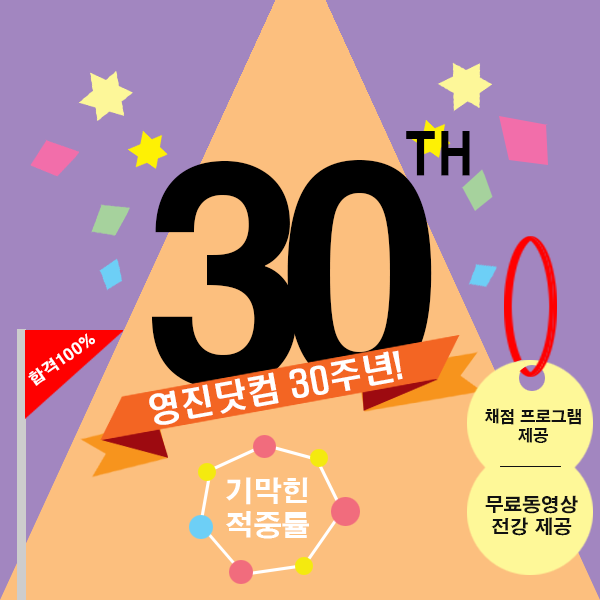
<style>
.page{position:relative;width:600px;height:600px;background:#a286c0}
.page>*{position:absolute;margin:0}
.t1{font:57.6px "H2gtrE";color:#000000;scale:0.81 1}
.t2{font:286px "H2gtrE";color:#000000}
.t3{font:282.1px "H2gtrE";color:#000000}
.t4{font:15.5px "H2gtrE";color:#ffffff}
.t5{font:33.4px "H2hdrM";color:#ffffff}
.t6{font:15.9px "H2gtrE";color:#111111}
.t7{font:28.5px "H2gtrE";color:#ffffff}
.t8{font:18.6px "H2gtrE";color:#111111}
</style>
<div class="page">
<p class="t1" style="left:406px;top:131px;width:64px;height:45px">TH</p>
<p class="t2" style="left:151px;top:161px;width:146px;height:228px">3</p>
<p class="t3" style="left:287px;top:160px;width:145px;height:226px">0</p>
<p class="t4" style="left:28px;top:333px;width:67px;height:53px;rotate:-35deg">합격100%</p>
<p class="t5" style="left:149px;top:350px;width:254px;height:75px;rotate:-10deg">영진닷컴 30주년!</p>
<p class="t6" style="left:484px;top:408px;width:98px;height:35px;text-align:center">채점 프로그램<br>제공</p>
<p class="t7" style="left:226px;top:477px;width:83px;height:62px">기막힌<br>적중률</p>
<p class="t8" style="left:485px;top:495px;width:93px;height:41px;text-align:center">무료동영상<br>전강 제공</p>
</div>
